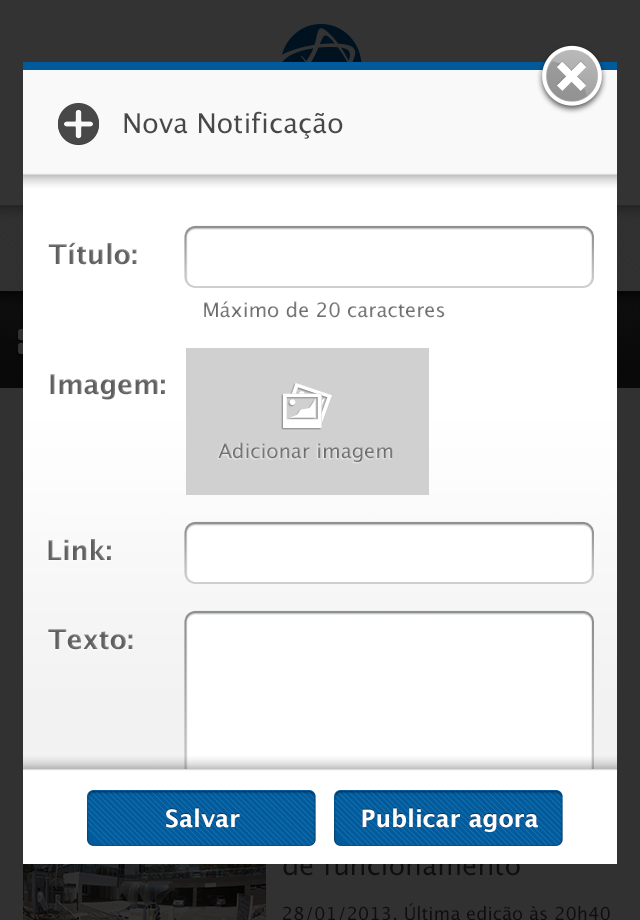
<style>
.page{position:relative;width:640px;height:920px;background:#ffffff}
.page>*{position:absolute;margin:0}
.t1{font:27.2px "LucidaGrande";color:#484848}
.t2{font:27.2px "LucidaGrande-Bold";color:#5d5d5d}
.t3{font:19.9px "LucidaGrande";color:#767676}
.t4{font:24px "LucidaGrande-Bold";color:#ffffff}
</style>
<div class="page">
<p class="t1" style="left:124px;top:111px;width:219px;height:28px">Nova Notificação</p>
<p class="t2" style="left:48px;top:242px;width:89px;height:23px">Título:</p>
<p class="t3" style="left:204px;top:301px;width:241px;height:17px">Máximo de 20 caracteres</p>
<p class="t2" style="left:50px;top:374px;width:115px;height:26px">Imagem:</p>
<p class="t3" style="left:218px;top:442px;width:175px;height:20px">Adicionar imagem</p>
<p class="t2" style="left:48px;top:539px;width:63px;height:21px">Link:</p>
<p class="t2" style="left:48px;top:629px;width:85px;height:21px">Texto:</p>
<p class="t4" style="left:166px;top:808px;width:74px;height:20px">Salvar</p>
<p class="t4" style="left:362px;top:808px;width:176px;height:24px">Publicar agora</p>
</div>
